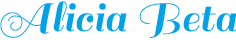
<style>
.page{position:relative;width:236px;height:40px;background:#ffffff}
.page>*{position:absolute;margin:0}
.t1{font:45.8px "Sail-Regular";color:#00a2e8}
</style>
<div class="page">
<p class="t1" style="left:0px;top:1px;width:237px;height:37px">Alicia Beta</p>
</div>
